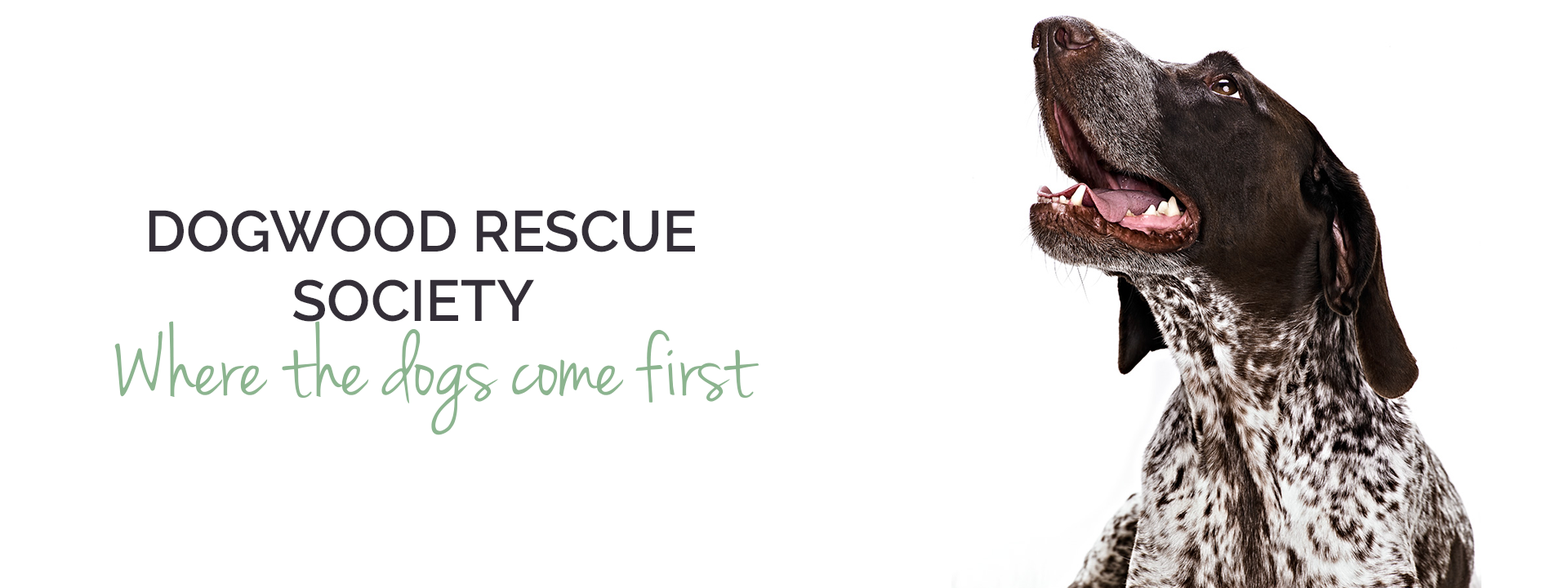
<style>
.page{position:relative;width:1568px;height:588px;background:#ffffff}
.page>*{position:absolute;margin:0}
.t1{font:57.8px "Raleway-SemiBold";color:#342f38}
.t2{font:102.1px "JennaSue";color:#8cb48f}
</style>
<div class="page">
<p class="t1" style="left:149px;top:210px;width:546px;height:112px">DOGWOOD RESCUE<br>     SOCIETY</p>
<p class="t2" style="left:114px;top:321px;width:645px;height:114px">Where the dogs come first</p>
</div>
